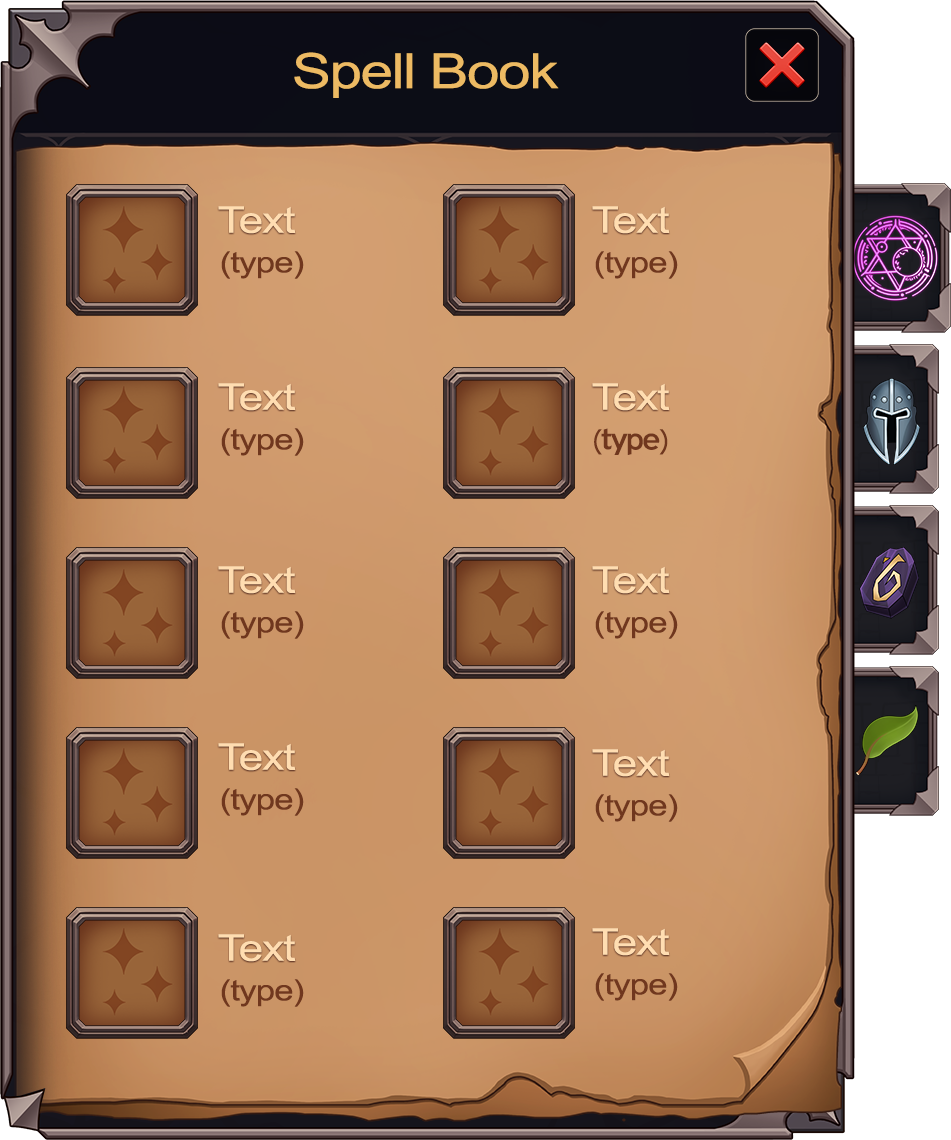
<style>
.page{position:relative;width:951px;height:1140px}
.page>*{position:absolute;margin:0}
.t1{font:48.7px "ArialMT";letter-spacing:-0.025em;color:#edba63;scale:1.2 1}
.t2{font:36.9px "ArialMT";letter-spacing:-0.025em;color:#ffddb1;scale:1.2 1}
.t3{font:29px "ArialMT";letter-spacing:-0.025em;color:#70371e;scale:1.2 1}
.t4{font:29px "ExpresswayFree";letter-spacing:-0.025em;color:#70371e;scale:1.2 1}
</style>
<div class="page">
<p class="t1" style="left:294px;top:52px;width:265px;height:46px">Spell Book</p>
<p class="t2" style="left:218px;top:206px;width:78px;height:28px">Text</p>
<p class="t2" style="left:592px;top:206px;width:78px;height:28px">Text</p>
<p class="t3" style="left:221px;top:251px;width:83px;height:28px">(type)</p>
<p class="t3" style="left:595px;top:251px;width:83px;height:28px">(type)</p>
<p class="t2" style="left:218px;top:383px;width:78px;height:28px">Text</p>
<p class="t2" style="left:592px;top:383px;width:78px;height:28px">Text</p>
<p class="t3" style="left:221px;top:428px;width:83px;height:28px">(type)</p>
<p class="t4" style="left:594px;top:428px;width:74px;height:27px">(type)</p>
<p class="t2" style="left:218px;top:566px;width:78px;height:28px">Text</p>
<p class="t2" style="left:592px;top:566px;width:78px;height:28px">Text</p>
<p class="t3" style="left:221px;top:611px;width:83px;height:28px">(type)</p>
<p class="t3" style="left:595px;top:611px;width:83px;height:28px">(type)</p>
<p class="t2" style="left:218px;top:743px;width:78px;height:28px">Text</p>
<p class="t2" style="left:592px;top:749px;width:78px;height:28px">Text</p>
<p class="t3" style="left:221px;top:788px;width:83px;height:28px">(type)</p>
<p class="t3" style="left:595px;top:794px;width:83px;height:28px">(type)</p>
<p class="t2" style="left:592px;top:928px;width:78px;height:28px">Text</p>
<p class="t2" style="left:218px;top:934px;width:78px;height:28px">Text</p>
<p class="t3" style="left:595px;top:973px;width:83px;height:28px">(type)</p>
<p class="t3" style="left:221px;top:979px;width:83px;height:28px">(type)</p>
</div>
